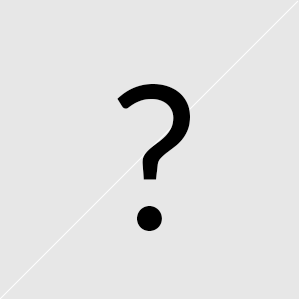
<style>
.page{position:relative;width:299px;height:299px;background:#e7e7e7}
.page>*{position:absolute;margin:0}
.t1{font:200px "Lato-Regular";letter-spacing:-0.01em;color:#000000}
</style>
<div class="page">
<p class="t1" style="left:117px;top:84px;width:73px;height:147px">?</p>
</div>
